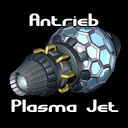
<style>
.page{position:relative;width:128px;height:128px;background:#000000}
.page>*{position:absolute;margin:0}
.t1{font:18px "GravitateBRK";color:#ffffff}
</style>
<div class="page">
<p class="t1" style="left:29px;top:13px;width:70px;height:13px">Antrieb</p>
<p class="t1" style="left:11px;top:99px;width:108px;height:13px">Plasma Jet</p>
</div>
